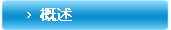
<style>
.page{position:relative;width:171px;height:30px}
.page>*{position:absolute;margin:0}
.t1{font:15px "MicrosoftYaHei";color:#ffffff;font-weight:bold}
</style>
<div class="page">
<p class="t1" style="left:40px;top:8px;width:32px;height:13px">概述</p>
</div>
